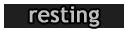
<style>
.page{position:relative;width:128px;height:32px;background:#1f1f1f}
.page>*{position:absolute;margin:0}
.t1{font:22px "TrebuchetMS";color:#bebebe;font-weight:bold}
</style>
<div class="page">
<p class="t1" style="left:29px;top:6px;width:71px;height:21px">resting</p>
</div>
